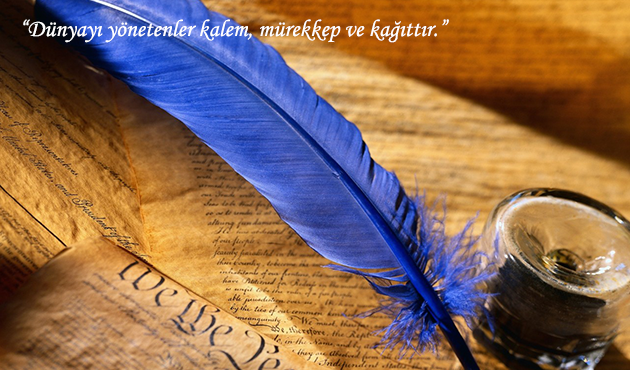
<style>
.page{position:relative;width:630px;height:370px}
.page>*{position:absolute;margin:0}
.t1{font:24px "MonotypeCorsiva";color:#ffffff}
</style>
<div class="page">
<p class="t1" style="left:23px;top:19px;width:426px;height:24px">“Dünyayı yönetenler kalem, mürekkep ve kağıttır.”</p>
</div>
